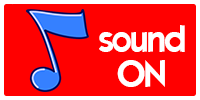
<style>
.page{position:relative;width:200px;height:100px;background:#ff0000}
.page>*{position:absolute;margin:0}
.t1{font:36px "ELEGANCE";color:#ffffff}
</style>
<div class="page">
<p class="t1" style="left:99px;top:25px;width:86px;height:27px">sound</p>
<p class="t1" style="left:117px;top:60px;width:48px;height:27px">ON</p>
</div>
